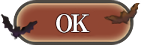
<style>
.page{position:relative;width:141px;height:45px}
.page>*{position:absolute;margin:0}
.t1{font:24px "RyuminPro-ExBold";letter-spacing:-0.08em;color:#ffffff}
</style>
<div class="page">
<p class="t1" style="left:56px;top:14px;width:34px;height:19px">OK</p>
</div>
